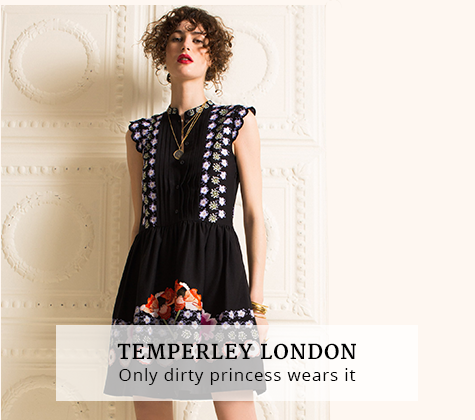
<style>
.page{position:relative;width:475px;height:420px;background:#fef7f1}
.page>*{position:absolute;margin:0}
.t1{font:20px "Merriweather-Bold";letter-spacing:0.05em;color:#000000}
.t2{font:17px "OpenSans";letter-spacing:0.05em;color:#000000}
</style>
<div class="page">
<p class="t1" style="left:117px;top:343px;width:239px;height:17px">TEMPERLEY LONDON</p>
<p class="t2" style="left:119px;top:368px;width:237px;height:17px">Only dirty princess wears it</p>
</div>
